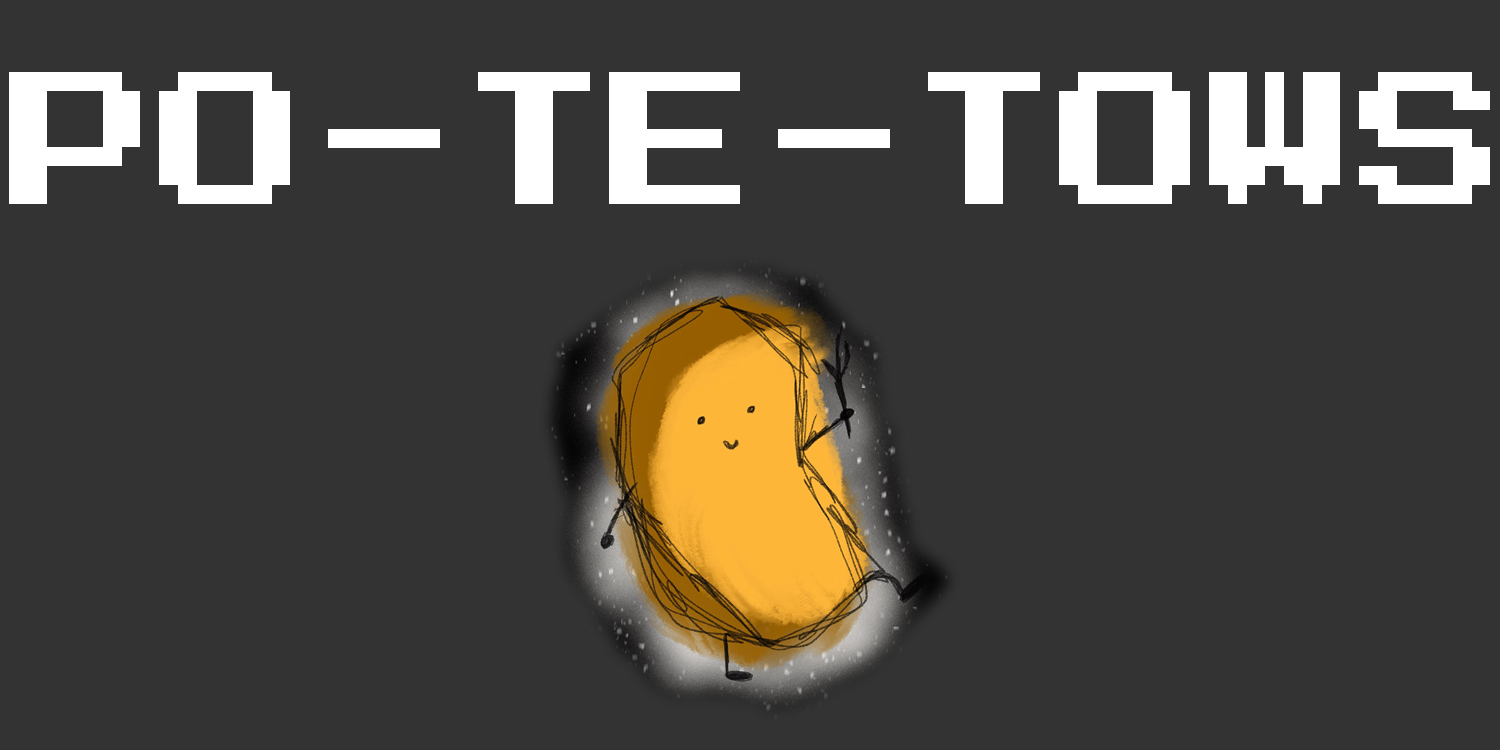
<style>
.page{position:relative;width:1500px;height:750px;background:#333333}
.page>*{position:absolute;margin:0}
.t1{font:150px "PressStart2P-Regular";color:#ffffff;text-transform:uppercase}
</style>
<div class="page">
<p class="t1" style="left:9px;top:72px;width:1481px;height:132px">PO-TE-TOWS</p>
</div>
